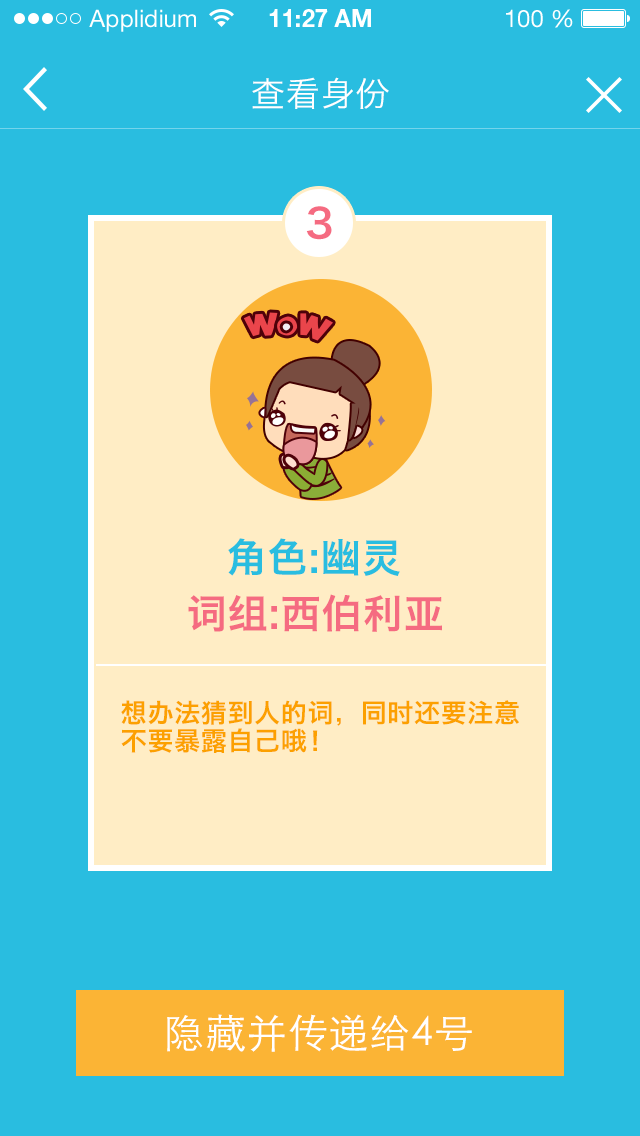
<style>
.page{position:relative;width:640px;height:1136px;background:#29bde0}
.page>*{position:absolute;margin:0}
.t1{font:34px "HiraginoSansGB-W3";letter-spacing:0.025em;color:#ffffff}
.t2{font:40px "HiraginoSansGB-W6";letter-spacing:0.025em;color:#f56b81}
.t3{font:40px "HiraginoSansGB-W6";letter-spacing:0.025em;color:#29bde0}
.t4{font:26px/28px "HiraginoSansGB-W6";letter-spacing:0.025em;color:#fca000}
.t5{font:40px "STHeitiSC-Light";letter-spacing:0.025em;color:#ffffff}
</style>
<div class="page">
<p class="t1" style="left:252px;top:77px;width:137px;height:32px">查看身份</p>
<p class="t2" style="left:306px;top:206px;width:26px;height:34px">3</p>
<p class="t3" style="left:228px;top:538px;width:172px;height:38px">角色:幽灵</p>
<p class="t2" style="left:188px;top:594px;width:254px;height:38px">词组:西伯利亚</p>
<p class="t4" style="left:121px;top:700px;width:398px;height:53px">想办法猜到人的词，同时还要注意<br>不要暴露自己哦！</p>
<p class="t5" style="left:167px;top:1014px;width:305px;height:38px">隐藏并传递给4号</p>
</div>
